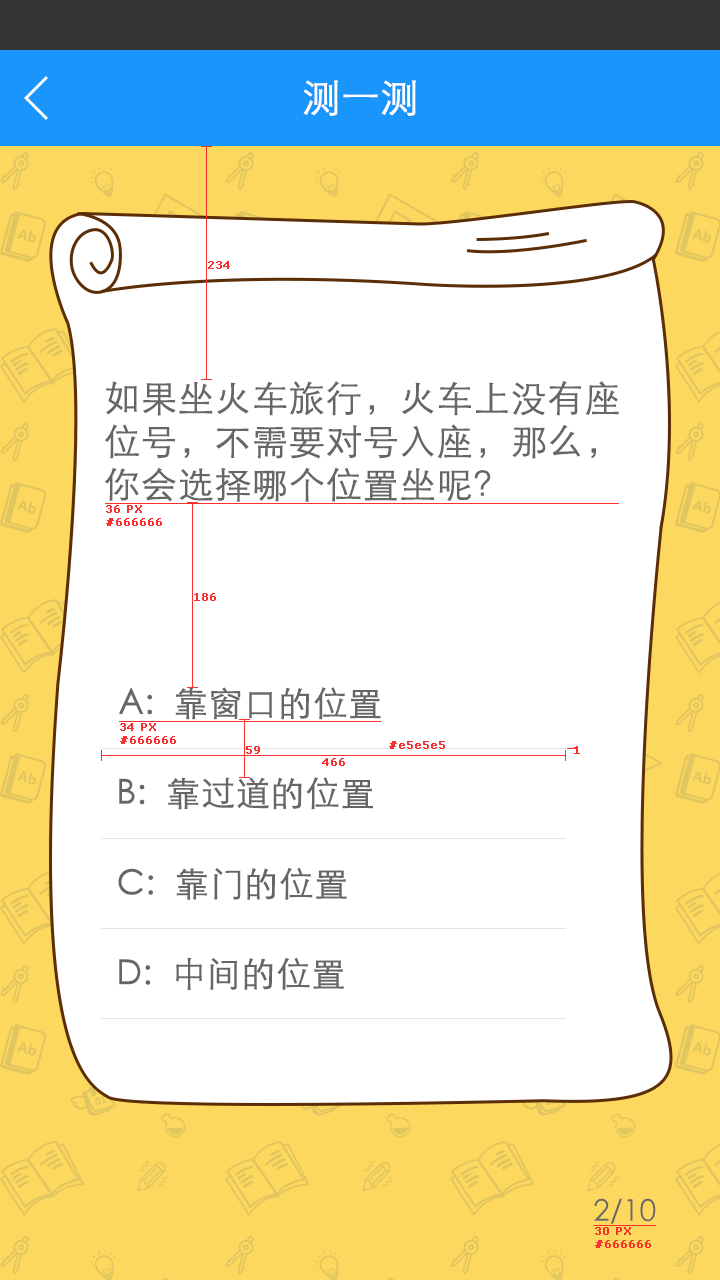
<style>
.page{position:relative;width:720px;height:1280px;background:#ffffff}
.page>*{position:absolute;margin:0}
.t1{font:38px "STXihei";color:#ffffff;font-weight:bold}
.t2{font:11px "Verdana";color:#f83030;font-weight:bold}
.t3{font:36px "STXihei";color:#666666;font-weight:bold}
.t4{font:34px "STXihei";color:#666666;font-weight:bold}
.t5{font:30px "STXihei";color:#666666}
</style>
<div class="page">
<p class="t1" style="left:303px;top:80px;width:113px;height:36px">测一测</p>
<p class="t2" style="left:208px;top:261px;width:22px;height:8px">234</p>
<p class="t3" style="left:105px;top:381px;width:514px;height:121px">如果坐火车旅行，火车上没有座<br>位号，不需要对号入座，那么，<br>你会选择哪个位置坐呢？</p>
<p class="t2" style="left:106px;top:505px;width:56px;height:21px">36 PX<br>#666666</p>
<p class="t2" style="left:194px;top:593px;width:22px;height:8px">186</p>
<p class="t4" style="left:119px;top:687px;width:262px;height:33px">A:  靠窗口的位置</p>
<p class="t2" style="left:120px;top:723px;width:56px;height:21px">34 PX<br>#666666</p>
<p class="t2" style="left:120px;top:723px;width:56px;height:21px">34 PX<br>#666666</p>
<p class="t2" style="left:246px;top:746px;width:14px;height:8px">59</p>
<p class="t2" style="left:389px;top:741px;width:56px;height:8px">#e5e5e5</p>
<p class="t2" style="left:574px;top:746px;width:6px;height:8px">1</p>
<p class="t2" style="left:322px;top:758px;width:23px;height:8px">466</p>
<p class="t4" style="left:119px;top:777px;width:254px;height:33px">B:  靠过道的位置</p>
<p class="t4" style="left:118px;top:867px;width:229px;height:33px">C:  靠门的位置</p>
<p class="t4" style="left:119px;top:957px;width:225px;height:33px">D:  中间的位置</p>
<p class="t5" style="left:594px;top:1198px;width:62px;height:26px">2/10</p>
<p class="t2" style="left:595px;top:1227px;width:56px;height:21px">30 PX<br>#666666</p>
</div>
